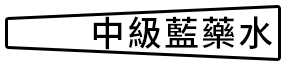
<style>
.page{position:relative;width:286px;height:66px;background:#ffffff}
.page>*{position:absolute;margin:0}
.t1{font:35px "NotoSansCJKtc-Medium";letter-spacing:0.06em;color:#000000}
</style>
<div class="page">
<p class="t1" style="left:93px;top:16px;width:180px;height:34px">中級藍藥水</p>
</div>
